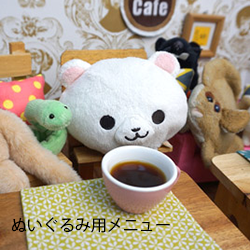
<style>
.page{position:relative;width:250px;height:250px}
.page>*{position:absolute;margin:0}
.t1{font:16px "KozGoPr6N-Regular";color:#000000}
</style>
<div class="page">
<p class="t1" style="left:12px;top:217px;width:158px;height:16px">ぬいぐるみ用メニュー</p>
</div>
